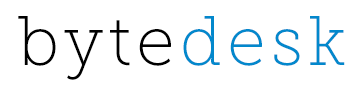
<style>
.page{position:relative;width:360px;height:90px;background:#ffffff}
.page>*{position:absolute;margin:0}
.t1{font:70px "MuseoSlab-100";letter-spacing:0.075em;color:#000000}
.t2{font:70px "MuseoSlab-100";letter-spacing:0.075em;color:#0288cc}
</style>
<div class="page">
<p class="t1" style="left:18px;top:16px;width:327px;height:64px">byte<span class="t2">desk</span></p>
</div>
